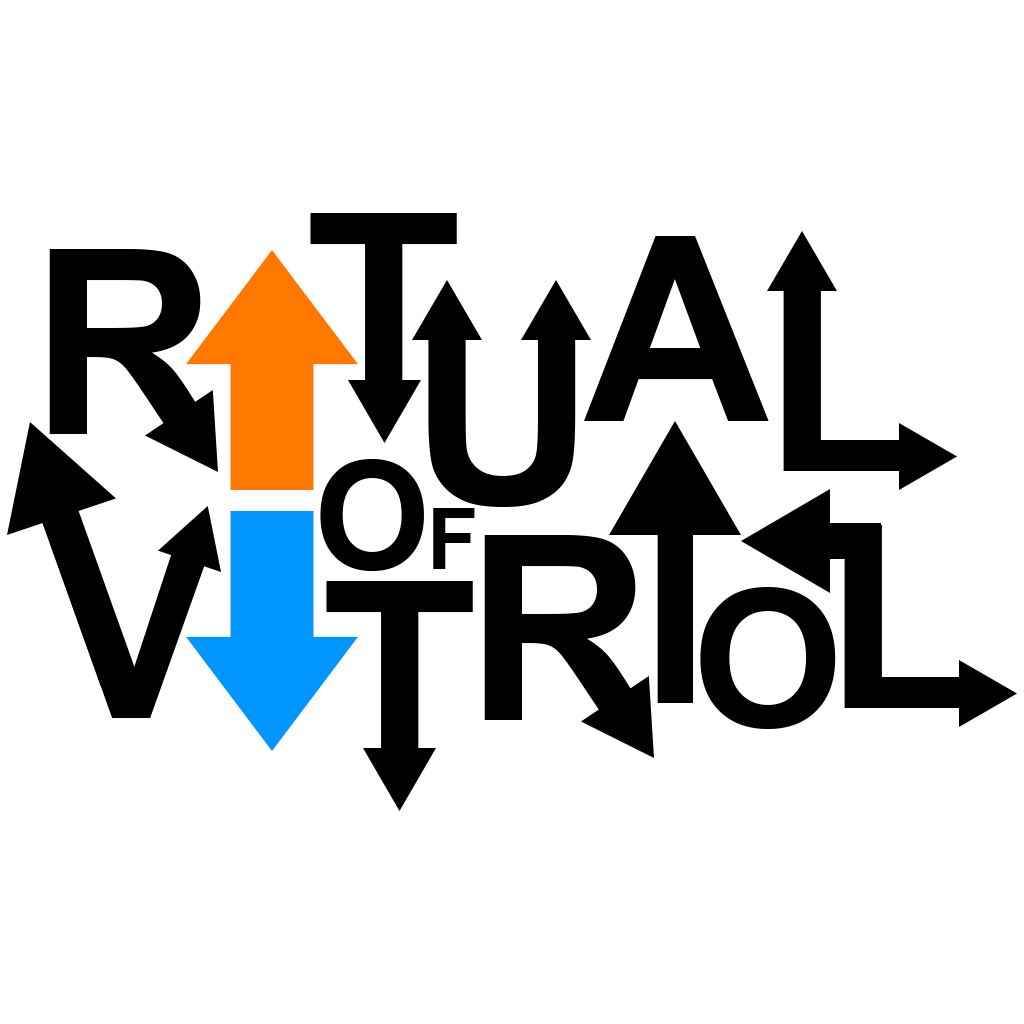
<style>
.page{position:relative;width:1024px;height:1024px;background:#ffffff}
.page>*{position:absolute;margin:0}
.t1{font:257.5px "Arial-BoldMT";letter-spacing:0.025em;color:#000000}
.t2{font:151px "Arial-BoldMT";letter-spacing:-0.02em;color:#000000}
.t3{font:85.1px "Arial-BoldMT";letter-spacing:-0.02em;color:#000000}
.t4{font:244.3px "Arial-BoldMT";color:#000000}
.t5{font:193.5px "Arial-BoldMT";color:#000000}
</style>
<div class="page">
<p class="t1" style="left:310px;top:213px;width:147px;height:185px">T</p>
<p class="t1" style="left:584px;top:236px;width:185px;height:185px">A</p>
<p class="t1" style="left:49px;top:249px;width:167px;height:185px">R</p>
<p class="t1" style="left:783px;top:288px;width:131px;height:183px">L</p>
<p class="t1" style="left:428px;top:319px;width:148px;height:188px">U</p>
<p class="t2" style="left:320px;top:459px;width:155px;height:112px">O<span class="t3">F</span></p>
<p class="t4" style="left:657px;top:528px;width:36px;height:175px">I</p>
<p class="t1" style="left:844px;top:525px;width:131px;height:183px">L</p>
<p class="t4" style="left:49px;top:543px;width:164px;height:175px">V</p>
<p class="t1" style="left:484px;top:535px;width:167px;height:185px">R</p>
<p class="t1" style="left:326px;top:581px;width:147px;height:185px">T</p>
<p class="t5" style="left:700px;top:587px;width:136px;height:142px">O</p>
</div>
